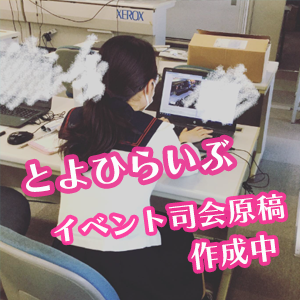
<style>
.page{position:relative;width:300px;height:300px}
.page>*{position:absolute;margin:0}
.t1{font:36px "ChiaroStd-B";color:#fafdfd}
.t2{font:27.8px "ChiaroStd-B";color:#fafdfd;scale:1.06 1}
.t3{font:29.8px "ChiaroStd-B";color:#fafdfd}
</style>
<div class="page">
<p class="t1" style="left:26px;top:139px;width:207px;height:53px;rotate:-7deg">とよひらいぶ</p>
<p class="t2" style="left:54px;top:194px;width:231px;height:48px;rotate:-6deg">イベント司会原稿</p>
<p class="t3" style="left:191px;top:234px;width:85px;height:36px;rotate:-7deg">作成中</p>
</div>
